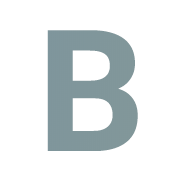
<style>
.page{position:relative;width:180px;height:180px;background:#ffffff}
.page>*{position:absolute;margin:0}
.t1{font:170px "Roboto-Bold";color:#80969b}
</style>
<div class="page">
<p class="t1" style="left:47px;top:30px;width:91px;height:121px">B</p>
</div>
